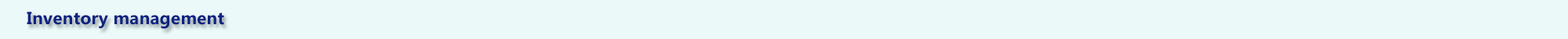
<style>
.page{position:relative;width:1568px;height:39px;background:#ebf9f9}
.page>*{position:absolute;margin:0}
.t1{font:16.3px "MicrosoftYaHei-Bold";letter-spacing:0.015em;color:#0d227f}
</style>
<div class="page">
<p class="t1" style="left:27px;top:12px;width:197px;height:17px">Inventory management</p>
</div>
